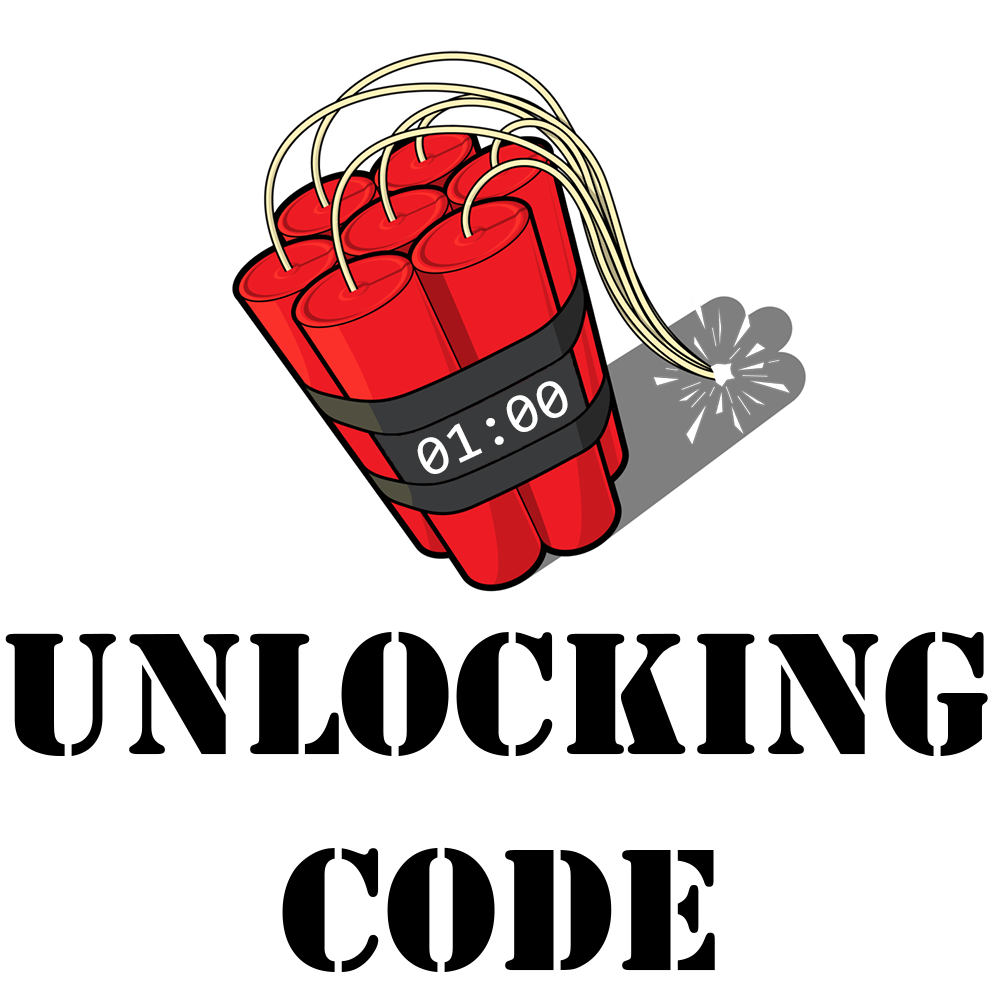
<style>
.page{position:relative;width:1000px;height:1000px;background:#ffffff}
.page>*{position:absolute;margin:0}
.t1{font:180px "Army";color:#000000}
</style>
<div class="page">
<p class="t1" style="left:5px;top:631px;width:983px;height:341px">unlocking<br>code</p>
</div>
